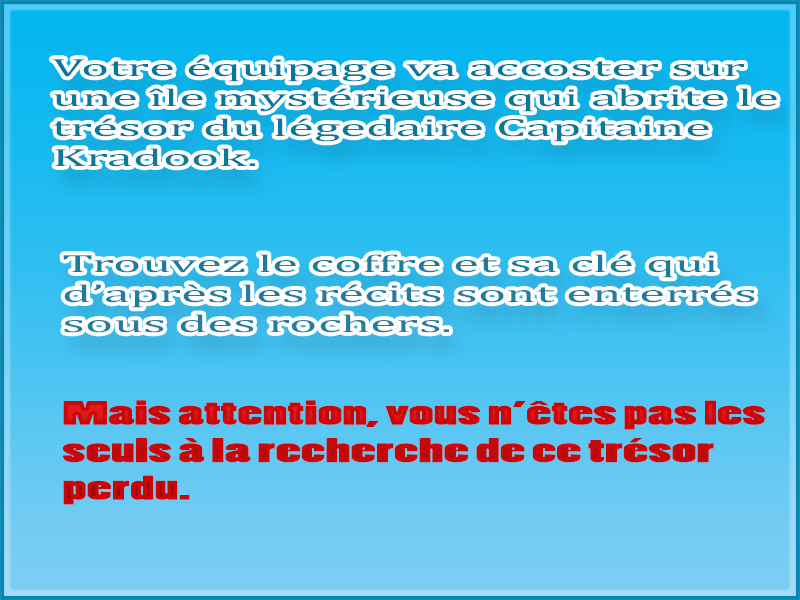
<style>
.page{position:relative;width:800px;height:600px}
.page>*{position:absolute;margin:0}
.t1{font:25px "CambriaMath";color:#06789e;scale:2.13 1}
.t2{font:25px "CambriaMath";color:#207d9f;scale:2.13 1}
.t3{font:31.3px "PoplarStd";color:#cc0507;scale:2.13 1}
</style>
<div class="page">
<p class="t1" style="left:52px;top:58px;width:725px;height:109px">Votre équipage va accoster sur une île mystérieuse qui abrite le trésor du légedaire Capitaine Kradook.</p>
<p class="t2" style="left:63px;top:254px;width:692px;height:79px">Trouvez le coffre et sa clé qui d’après les récits sont enterrés sous des rochers.</p>
<p class="t3" style="left:62px;top:400px;width:703px;height:105px">Mais attention, vous n’êtes pas les seuls à la recherche de ce trésor perdu.</p>
</div>
